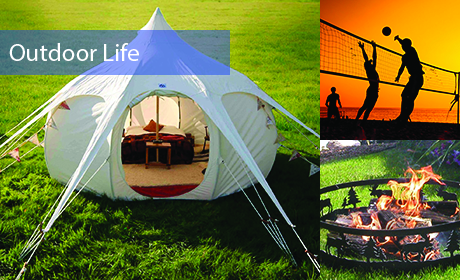
<style>
.page{position:relative;width:460px;height:280px}
.page>*{position:absolute;margin:0}
.t1{font:25px "MyriadPro-Regular";color:#fefeff}
</style>
<div class="page">
<p class="t1" style="left:9px;top:43px;width:130px;height:18px">Outdoor Life</p>
</div>
